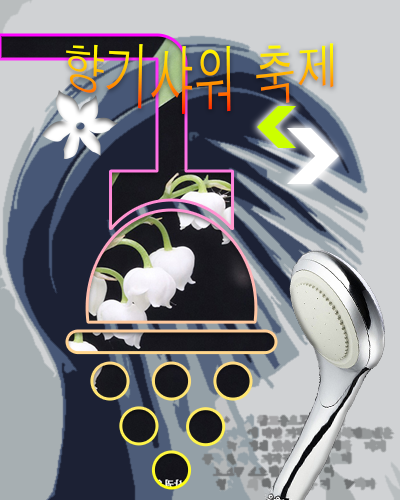
<style>
.page{position:relative;width:400px;height:500px;background:#d0d2d4}
.page>*{position:absolute;margin:0}
.t1{font:45px "Dotum";letter-spacing:-0.02em}
</style>
<div class="page">
<p class="t1" style="left:66px;top:43px;width:268px;height:72px">향기샤워 축제</p>
</div>
